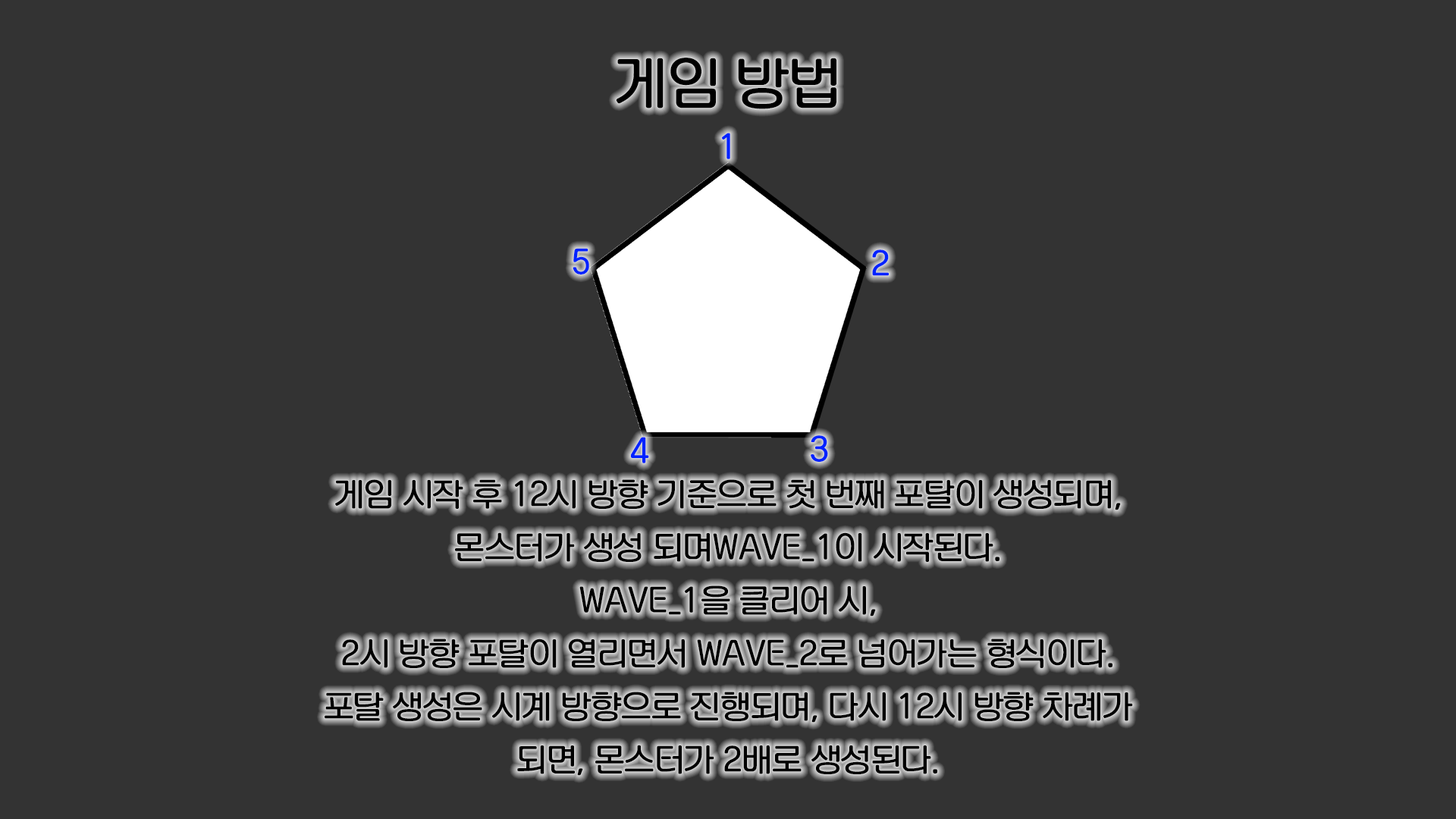
<style>
.page{position:relative;width:1456px;height:819px;background:#333333}
.page>*{position:absolute;margin:0}
.t1{font:53.1px "KoreanNGL2-R";color:#000000}
.t2{font:30.3px "KoreanNGL2-R";color:#0022ff}
.t3{font:30.3px "KoreanNGL2-R";color:#000000}
</style>
<div class="page">
<p class="t1" style="left:616px;top:58px;width:220px;height:51px">게임 방법</p>
<p class="t2" style="left:721px;top:133px;width:9px;height:26px">1</p>
<p class="t2" style="left:573px;top:248px;width:16px;height:27px">5</p>
<p class="t2" style="left:872px;top:249px;width:17px;height:27px">2</p>
<p class="t2" style="left:631px;top:437px;width:18px;height:26px">4</p>
<p class="t2" style="left:811px;top:435px;width:17px;height:27px">3</p>
<p class="t3" style="left:325px;top:479px;width:808px;height:297px;text-align:center">게임 시작 후 12시 방향 기준으로 첫 번째 포탈이 생성되며,<br>몬스터가 생성 되며WAVE_1이 시작된다. <br>WAVE_1을 클리어 시, <br>2시 방향 포탈이 열리면서 WAVE_2로 넘어가는 형식이다.<br>포탈 생성은 시계 방향으로 진행되며, 다시 12시 방향 차례가<br>되면, 몬스터가 2배로 생성된다.</p>
</div>
